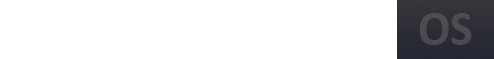
<style>
.page{position:relative;width:494px;height:59px;background:#ffffff}
.page>*{position:absolute;margin:0}
.t1{font:48px "Calibri-Bold";color:#4b4c50}
</style>
<div class="page">
<p class="t1" style="left:419px;top:13px;width:53px;height:32px">OS</p>
</div>
